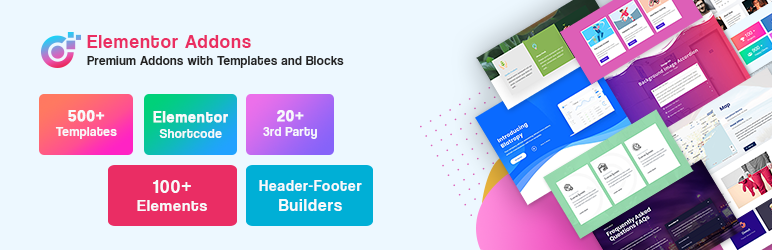
<style>
.page{position:relative;width:772px;height:250px;background:#edf8ff}
.page>*{position:absolute;margin:0}
.t1{font:12.7px/17.1px "CoolveticaRg-Regular";letter-spacing:0.05em;color:#242424}
.t2{font:19.4px/17.1px "CoolveticaRg-Regular";letter-spacing:0.05em;color:#ea2e61}
.t3{font:12.8px/14.7px "CoolveticaRg-Regular";letter-spacing:0.05em;color:#f7f9fb}
.t4{font:15.7px/14.7px "CoolveticaRg-Regular";letter-spacing:0.07em;color:#f7f9fb;font-weight:bold}
.t5{font:14.7px/15.9px "CoolveticaRg-Regular";letter-spacing:0.07em;color:#f7f9fb;font-weight:bold}
.t6{font:12.8px/15.9px "CoolveticaRg-Regular";letter-spacing:0.05em;color:#f7f9fb}
.t7{font:16.4px/17.4px "CoolveticaRg-Regular";letter-spacing:0.05em;color:#f7f9fb}
.t8{font:19.3px/17.4px "CoolveticaRg-Regular";letter-spacing:0.07em;color:#f7f9fb}
.t9{font:14.9px/18.1px "CoolveticaRg-Regular";letter-spacing:0.07em;color:#f7f9fb}
.t10{font:16.9px/19.3px "CoolveticaRg-Regular";letter-spacing:0.07em;color:#f7f9fb}
</style>
<div class="page">
<p class="t1" style="left:87px;top:35px;width:257px;height:33px"><span class="t2">Elementor Addons<br></span>Premium Addons with Templates and Blocks</p>
<p class="t3" style="left:55px;top:110px;width:62px;height:29px;text-align:center"><span class="t4">500+<br></span>Templates</p>
<p class="t5" style="left:153px;top:111px;width:75px;height:27px;text-align:center">Elementor<br><span class="t6">Shortcode</span></p>
<p class="t3" style="left:263px;top:110px;width:54px;height:29px;text-align:center"><span class="t4">20+<br></span>3rd Party</p>
<p class="t7" style="left:137px;top:180px;width:70px;height:31px;text-align:center"><span class="t8">100+<br></span>Elements</p>
<p class="t9" style="left:259px;top:180px;width:103px;height:31px;text-align:center">Header-Footer<br><span class="t10">Builders</span></p>
</div>
